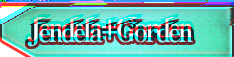
<style>
.page{position:relative;width:234px;height:57px}
.page>*{position:absolute;margin:0}
.t1{font:27px "RyuminPro-ExBold";letter-spacing:-0.12em}
</style>
<div class="page">
<p class="t1" style="left:27px;top:16px;width:166px;height:26px">Jendela+Gorden</p>
</div>
